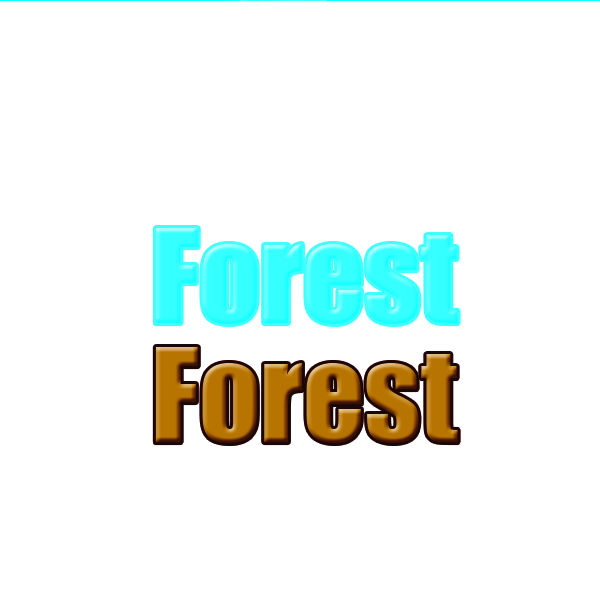
<style>
.page{position:relative;width:600px;height:600px;background:#ffffff}
.page>*{position:absolute;margin:0}
.t1{font:120px "Impact";color:#35ffff}
</style>
<div class="page">
<p class="t1" style="left:155px;top:227px;width:303px;height:96px">Forest</p>
</div>
